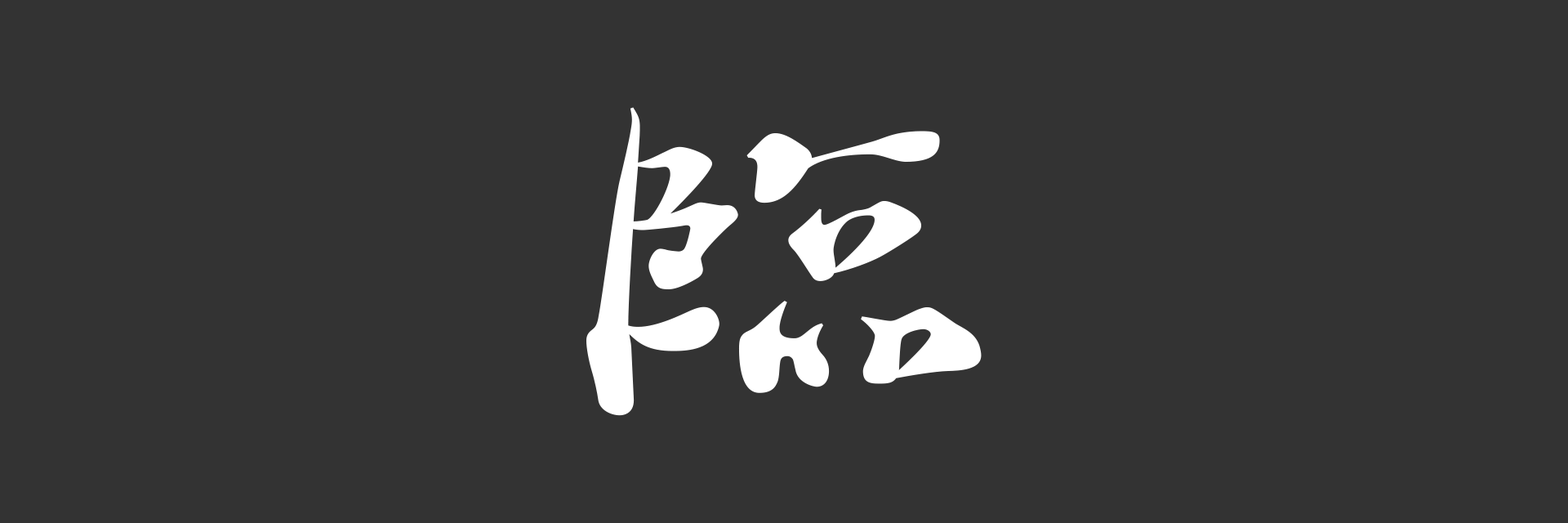
<style>
.page{position:relative;width:1568px;height:523px;background:#333333}
.page>*{position:absolute;margin:0}
.t1{font:340.3px "KazurakiSP2N-Light";color:#ffffff}
</style>
<div class="page">
<p class="t1" style="left:586px;top:107px;width:396px;height:309px">臨</p>
</div>
